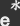
<style>
.page{position:relative;width:20px;height:26px;background:#333333}
.page>*{position:absolute;margin:0}
.t1{font:12px "DFKaiShu-SB-Estd-BF";color:#ececec;font-weight:bold}
.t2{font:18px "ArialMT";color:#ececec;font-weight:bold}
</style>
<div class="page">
<p class="t1" style="left:10px;top:0px;width:12px;height:11px">水</p>
<p class="t2" style="left:0px;top:16px;width:10px;height:11px">e</p>
</div>
